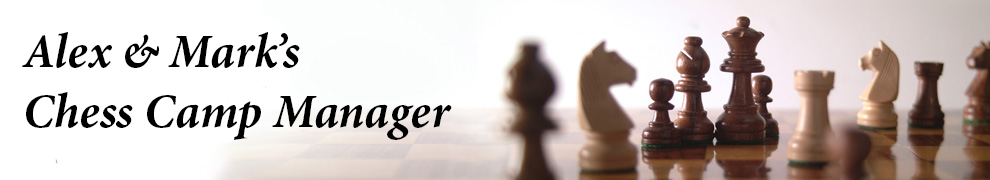
<style>
.page{position:relative;width:990px;height:180px;background:#ffffff}
.page>*{position:absolute;margin:0}
.t1{font:48px/30px "MinionPro-BoldIt";color:#000000}
</style>
<div class="page">
<p class="t1" style="left:22px;top:32px;width:430px;height:108px">Alex &amp; Mark’s <br> <br>Chess Camp Manager</p>
</div>
